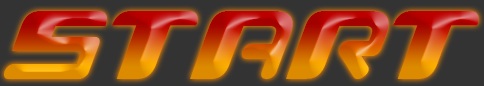
<style>
.page{position:relative;width:484px;height:86px;background:#333333}
.page>*{position:absolute;margin:0}
.t1{font:85.3px "KH2ALLMENUItalic"}
</style>
<div class="page">
<p class="t1" style="left:4px;top:11px;width:475px;height:68px">START</p>
</div>
